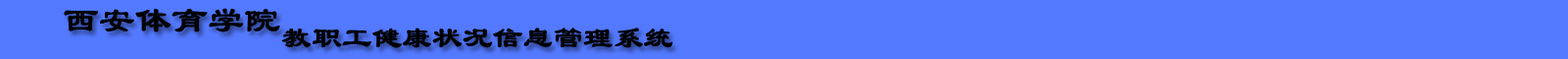
<style>
.page{position:relative;width:1568px;height:59px;background:#5379ff}
.page>*{position:absolute;margin:0}
.t1{font:35.3px "LiSu";color:#000003;font-weight:bold}
.t2{font:29.4px "LiSu";color:#000003;font-weight:bold}
</style>
<div class="page">
<p class="t1" style="left:64px;top:8px;width:216px;height:24px">西安体育学院</p>
<p class="t2" style="left:281px;top:27px;width:392px;height:21px">教职工健康状况信息管理系统</p>
</div>
